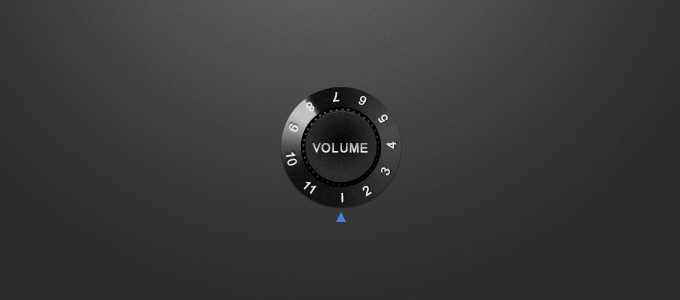
<style>
.page{position:relative;width:680px;height:300px}
.page>*{position:absolute;margin:0}
.t1{font:12.5px "ArialMT";letter-spacing:0.047em;color:#ebebe9;text-transform:uppercase;font-weight:bold}
.t2{font:12px "ArialMT";letter-spacing:0.04em;text-transform:uppercase;font-weight:bold}
</style>
<div class="page">
<p class="t1" style="left:286px;top:92px;width:111px;height:111px;rotate:-165deg">i     2     3     4     5     6     7     8     9     10     11</p>
<p class="t2" style="left:312px;top:143px;width:9px;height:10px">V</p>
<p class="t2" style="left:321px;top:143px;width:10px;height:10px">O</p>
<p class="t2" style="left:332px;top:143px;width:7px;height:10px">L</p>
<p class="t2" style="left:340px;top:143px;width:8px;height:10px">U</p>
<p class="t2" style="left:349px;top:143px;width:10px;height:10px">M</p>
<p class="t2" style="left:360px;top:143px;width:8px;height:10px">E</p>
</div>
